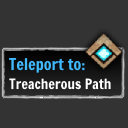
<style>
.page{position:relative;width:128px;height:128px;background:#333333}
.page>*{position:absolute;margin:0}
.t1{font:16px "FrancoisOne-Regular";color:#40b9ff}
.t2{font:14px "FrancoisOne-Regular";color:#ffffff}
</style>
<div class="page">
<p class="t1" style="left:9px;top:58px;width:76px;height:15px">Teleport to:</p>
<p class="t2" style="left:9px;top:78px;width:102px;height:12px">Treacherous Path</p>
</div>
